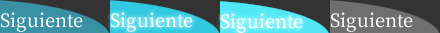
<style>
.page{position:relative;width:440px;height:33px;background:#333333}
.page>*{position:absolute;margin:0}
.t1{font:22px "OfficialFateFont-Medium";color:#ffffff}
</style>
<div class="page">
<p class="t1" style="left:0px;top:12px;width:83px;height:20px">Siguiente</p>
<p class="t1" style="left:110px;top:12px;width:83px;height:20px">Siguiente</p>
<p class="t1" style="left:220px;top:13px;width:83px;height:20px">Siguiente</p>
<p class="t1" style="left:330px;top:12px;width:83px;height:20px">Siguiente</p>
</div>
